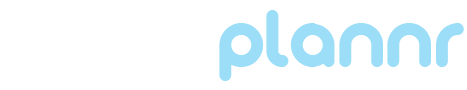
<style>
.page{position:relative;width:467px;height:90px;background:#ffffff}
.page>*{position:absolute;margin:0}
.t1{font:90px "zArista";color:#9cdef7}
.t2{font:90px "zArista";color:#ffffff}
</style>
<div class="page">
<p class="t1" style="left:3px;top:9px;width:461px;height:72px"><span class="t2">party</span>plannr</p>
</div>
